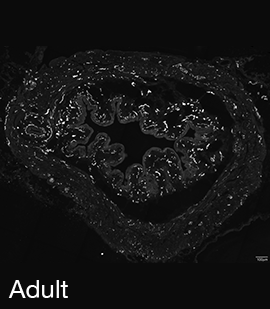
<style>
.page{position:relative;width:270px;height:309px;background:#0b0b0b}
.page>*{position:absolute;margin:0}
.t1{font:25.4px "HelveticaNeue";color:#ffffff}
</style>
<div class="page">
<p class="t1" style="left:8px;top:280px;width:60px;height:18px">Adult</p>
</div>
